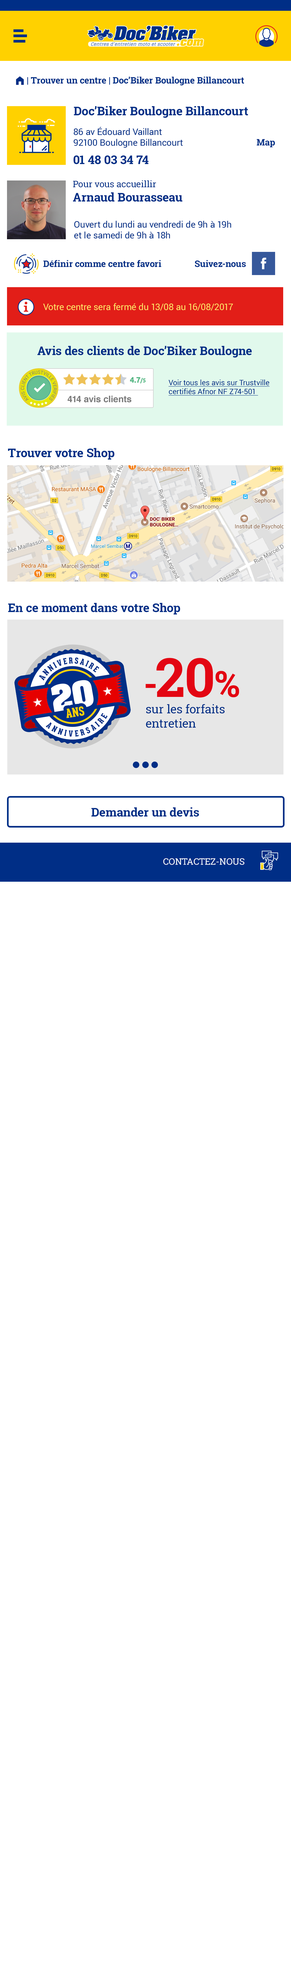
<style>
.page{position:relative;width:291px;height:1987px;background:#ffffff}
.page>*{position:absolute;margin:0}
.t1{font:9px "RobotoSlab-Bold";color:#002e86}
.t2{font:9px "FoundationIconsGeneral-Reg";color:#002e86}
.t3{font:12px "RobotoSlab-Bold";color:#002e86}
.t4{font:9px "Roboto-Regular";color:#002e86}
.t5{font:9px "RobotoSlab-Regular";color:#002e86}
.t6{font:9px "Roboto-Regular";color:#ffe366}
.t7{font:7.5px "Roboto-Regular";color:#002e86;text-decoration:underline}
.t8{font:9px "Helvetica-Bold";color:#7a7a7a}
.t9{font:54px "RobotoSlab-Bold";color:#e30613}
.t10{font:36px "RobotoSlab-Bold";color:#e30613}
.t11{font:12px "RobotoSlab-Regular";color:#002e86}
.t12{font:9px "RobotoSlab-Regular";color:#ffffff;text-transform:uppercase}
</style>
<div class="page">
<p class="t1" style="left:16px;top:76px;width:228px;height:9px"><span class="t2">m </span>| Trouver un centre | Doc’Biker Boulogne Billancourt</p>
<p class="t3" style="left:74px;top:106px;width:174px;height:12px">Doc’Biker Boulogne Billancourt</p>
<p class="t4" style="left:74px;top:127px;width:109px;height:21px">86 av Édouard Vaillant<br>92100 Boulogne Billancourt</p>
<p class="t1" style="left:257px;top:139px;width:18px;height:8px">Map</p>
<p class="t3" style="left:74px;top:155px;width:74px;height:9px">01 48 03 34 74</p>
<p class="t5" style="left:73px;top:180px;width:109px;height:22px">Pour vous accueillir<br><span class="t3">Arnaud Bourasseau</span></p>
<p class="t4" style="left:74px;top:221px;width:157px;height:18px">Ouvert du lundi au vendredi de 9h à 19h<br>et le samedi de 9h à 18h</p>
<p class="t1" style="left:43px;top:260px;width:118px;height:7px">Définir comme centre favori</p>
<p class="t1" style="left:195px;top:260px;width:51px;height:7px">Suivez-nous</p>
<p class="t6" style="left:43px;top:303px;width:190px;height:8px">Votre centre sera fermé du 13/08 au 16/08/2017</p>
<p class="t6" style="left:43px;top:303px;width:190px;height:8px">Votre centre sera fermé du 13/08 au 16/08/2017</p>
<p class="t3" style="left:37px;top:346px;width:215px;height:12px">Avis des clients de Doc’Biker Boulogne</p>
<p class="t7" style="left:168px;top:379px;width:102px;height:17px">Voir tous les avis sur Trustville<br>certifiés Afnor NF Z74-501</p>
<p class="t8" style="left:68px;top:396px;width:63px;height:6px">414 avis clients</p>
<p class="t3" style="left:8px;top:448px;width:106px;height:11px">Trouver votre Shop</p>
<p class="t3" style="left:8px;top:603px;width:172px;height:11px">En ce moment dans votre Shop</p>
<p class="t9" style="left:145px;top:658px;width:94px;height:40px"><span class="t10">-</span>20<span class="t10">%</span></p>
<p class="t11" style="left:146px;top:704px;width:79px;height:24px">sur les forfaits <br>entretien</p>
<p class="t3" style="left:91px;top:807px;width:108px;height:10px">Demander un devis</p>
<p class="t12" style="left:163px;top:858px;width:81px;height:7px">contactez-nous</p>
</div>
